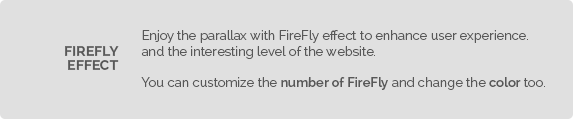
<style>
.page{position:relative;width:573px;height:119px;background:#e0e0e0}
.page>*{position:absolute;margin:0}
.t1{font:13px "Raleway-Regular";color:#585858}
.t2{font:13px "Raleway-SemiBold";color:#585858}
.t3{font:14px "Raleway-Bold";color:#585858}
</style>
<div class="page">
<p class="t1" style="left:141px;top:30px;width:404px;height:60px">Enjoy the parallax with FireFly effect to enhance user experience.  and the interesting level of the website.<br><br>You can customize the <span class="t2">number of FireFly</span> and change the <span class="t2">color </span>too.</p>
<p class="t3" style="left:65px;top:46px;width:54px;height:10px">FIREFLY</p>
<p class="t3" style="left:68px;top:60px;width:51px;height:10px">EFFECT</p>
</div>
